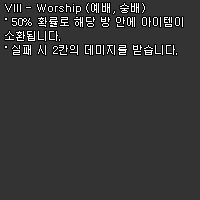
<style>
.page{position:relative;width:200px;height:200px;background:#333333}
.page>*{position:absolute;margin:0}
.t1{font:11px/14px "Dotum";color:#ffffff}
</style>
<div class="page">
<p class="t1" style="left:5px;top:3px;width:178px;height:52px">VIII - Worship (예배, 숭배)<br>˚ 50% 확률로 해당 방 안에 아이템이<br>소환됩니다.<br>˚ 실패 시 2칸의 데미지를 받습니다.</p>
</div>
